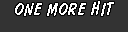
<style>
.page{position:relative;width:128px;height:32px;background:#333333}
.page>*{position:absolute;margin:0}
.t1{font:18px "DomDiagonalBT-Regular";letter-spacing:0.025em;color:#ffffff}
</style>
<div class="page">
<p class="t1" style="left:15px;top:1px;width:99px;height:15px">ONE MORE HIT</p>
</div>
